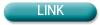
<style>
.page{position:relative;width:100px;height:25px}
.page>*{position:absolute;margin:0}
.t1{font:13.9px "MyriadPro-Regular";color:#ffffff}
</style>
<div class="page">
<p class="t1" style="left:38px;top:5px;width:26px;height:10px">LINK</p>
</div>
